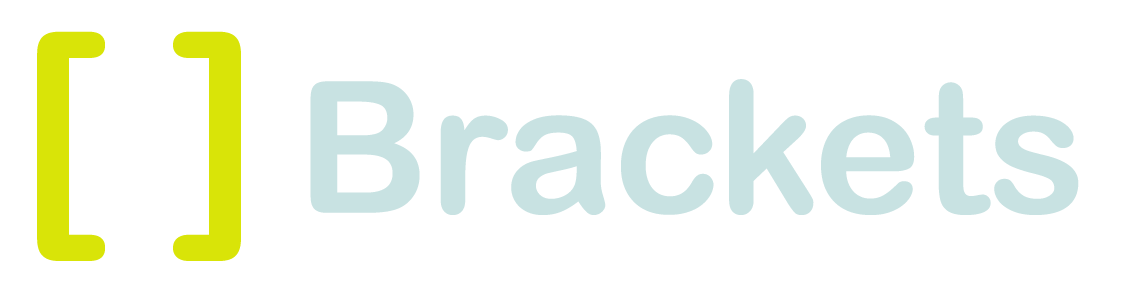
<style>
.page{position:relative;width:1125px;height:292px;background:#ffffff}
.page>*{position:absolute;margin:0}
.t1{font:250px "ArialRoundedMTBold";color:#d9e408}
.t2{font:183.3px "ArialRoundedMTBold";color:#c8e2e2}
</style>
<div class="page">
<p class="t1" style="left:37px;top:31px;width:204px;height:230px">[ ]</p>
<p class="t2" style="left:310px;top:79px;width:769px;height:136px">Brackets</p>
</div>
